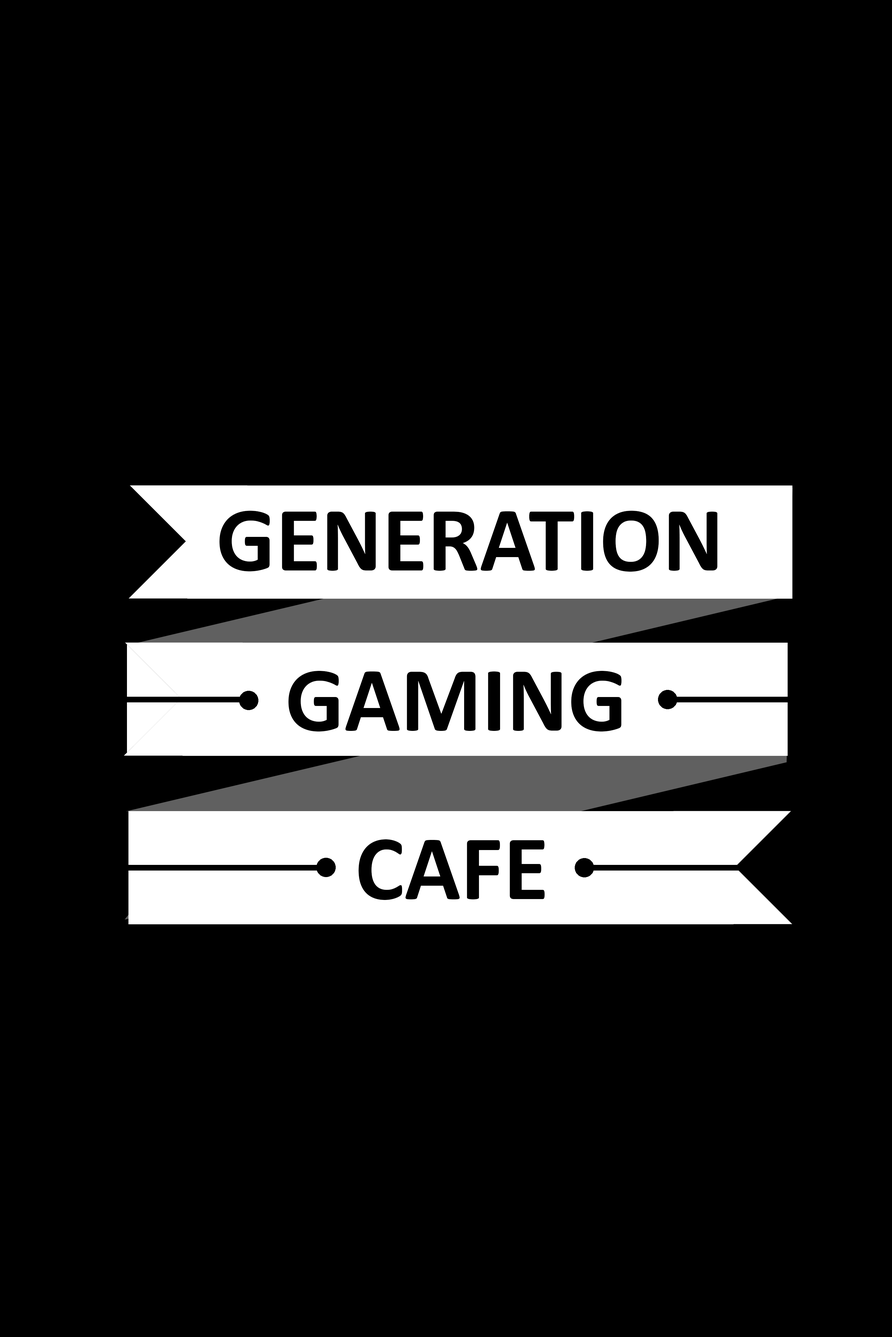
<style>
.page{position:relative;width:892px;height:1337px;background:#000000}
.page>*{position:absolute;margin:0}
.t1{font:92.9px "Calibri-Bold";color:#000000}
</style>
<div class="page">
<p class="t1" style="left:219px;top:511px;width:498px;height:61px">GENERATION</p>
<p class="t1" style="left:288px;top:671px;width:333px;height:61px">GAMING</p>
<p class="t1" style="left:358px;top:840px;width:186px;height:60px">CAFE</p>
</div>
